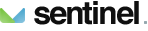
<style>
.page{position:relative;width:148px;height:31px;background:#ffffff}
.page>*{position:absolute;margin:0}
.t1{font:32px "Helvetica-Bold";letter-spacing:-0.06em;color:#0f0f0f}
</style>
<div class="page">
<p class="t1" style="left:34px;top:1px;width:105px;height:24px">sentinel</p>
</div>
